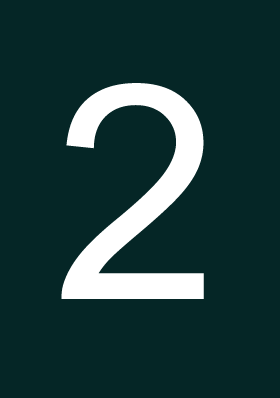
<style>
.page{position:relative;width:280px;height:398px;background:#052626}
.page>*{position:absolute;margin:0}
.t1{font:300px "ArialMT";color:#ffffff}
</style>
<div class="page">
<p class="t1" style="left:61px;top:83px;width:143px;height:216px">2</p>
</div>
